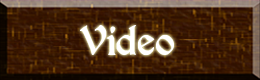
<style>
.page{position:relative;width:260px;height:80px}
.page>*{position:absolute;margin:0}
.t1{font:30px "BerryRotunda-Regular";color:#ffffff}
</style>
<div class="page">
<p class="t1" style="left:80px;top:25px;width:94px;height:30px">Video</p>
</div>
